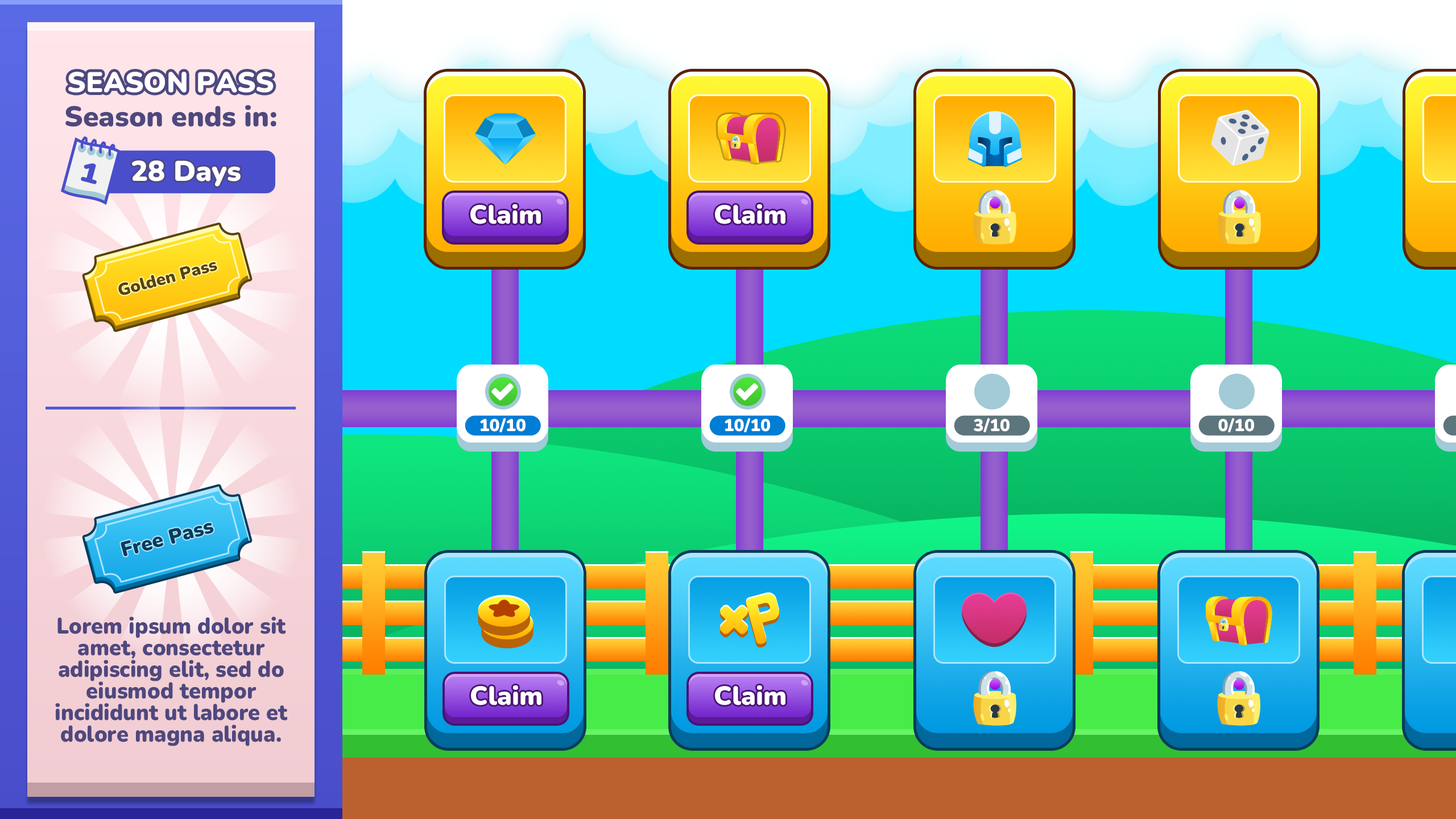
<style>
.page{position:relative;width:1456px;height:819px}
.page>*{position:absolute;margin:0}
.t1{font:28.4px "Nunito-Black";color:#ffffff}
.t2{font:28.4px "Nunito-Black";color:#4e487f}
.t3{font:27.5px "Nunito-Black";color:#4a4ecb;scale:1.16 1}
.t4{font:26px "Nunito-Black";color:#ffffff}
.t5{font:17.1px "Nunito-Black";color:#5a420a}
.t6{font:17.1px "Nunito-Black";color:#ffffff}
.t7{font:20.5px "Nunito-Black";color:#0a3b5a}
.t8{font:22.7px/21.6px "Nunito-Black";color:#4e487f;scale:0.95 1}
</style>
<div class="page">
<p class="t1" style="left:68px;top:72px;width:206px;height:21px">SEASON PASS</p>
<p class="t2" style="left:65px;top:105px;width:211px;height:22px">Season ends in:</p>
<p class="t1" style="left:132px;top:160px;width:109px;height:27px">28 Days</p>
<p class="t3" style="left:81px;top:163px;width:16px;height:21px;rotate:15deg">1</p>
<p class="t4" style="left:470px;top:204px;width:71px;height:20px">Claim</p>
<p class="t4" style="left:715px;top:204px;width:70px;height:20px">Claim</p>
<p class="t5" style="left:118px;top:262px;width:99px;height:33px;rotate:-15deg">Golden Pass</p>
<p class="t6" style="left:480px;top:418px;width:46px;height:15px">10/10</p>
<p class="t6" style="left:725px;top:418px;width:45px;height:15px">10/10</p>
<p class="t6" style="left:974px;top:418px;width:36px;height:15px">3/10</p>
<p class="t6" style="left:1218px;top:418px;width:36px;height:15px">0/10</p>
<p class="t7" style="left:121px;top:523px;width:93px;height:33px;rotate:-15deg">Free Pass</p>
<p class="t8" style="left:55px;top:617px;width:233px;height:129px;text-align:center">Lorem ipsum dolor sit amet, consectetur adipiscing elit, sed do eiusmod tempor incididunt ut labore et dolore magna aliqua.</p>
<p class="t4" style="left:471px;top:685px;width:70px;height:20px">Claim</p>
<p class="t4" style="left:715px;top:685px;width:70px;height:20px">Claim</p>
</div>
